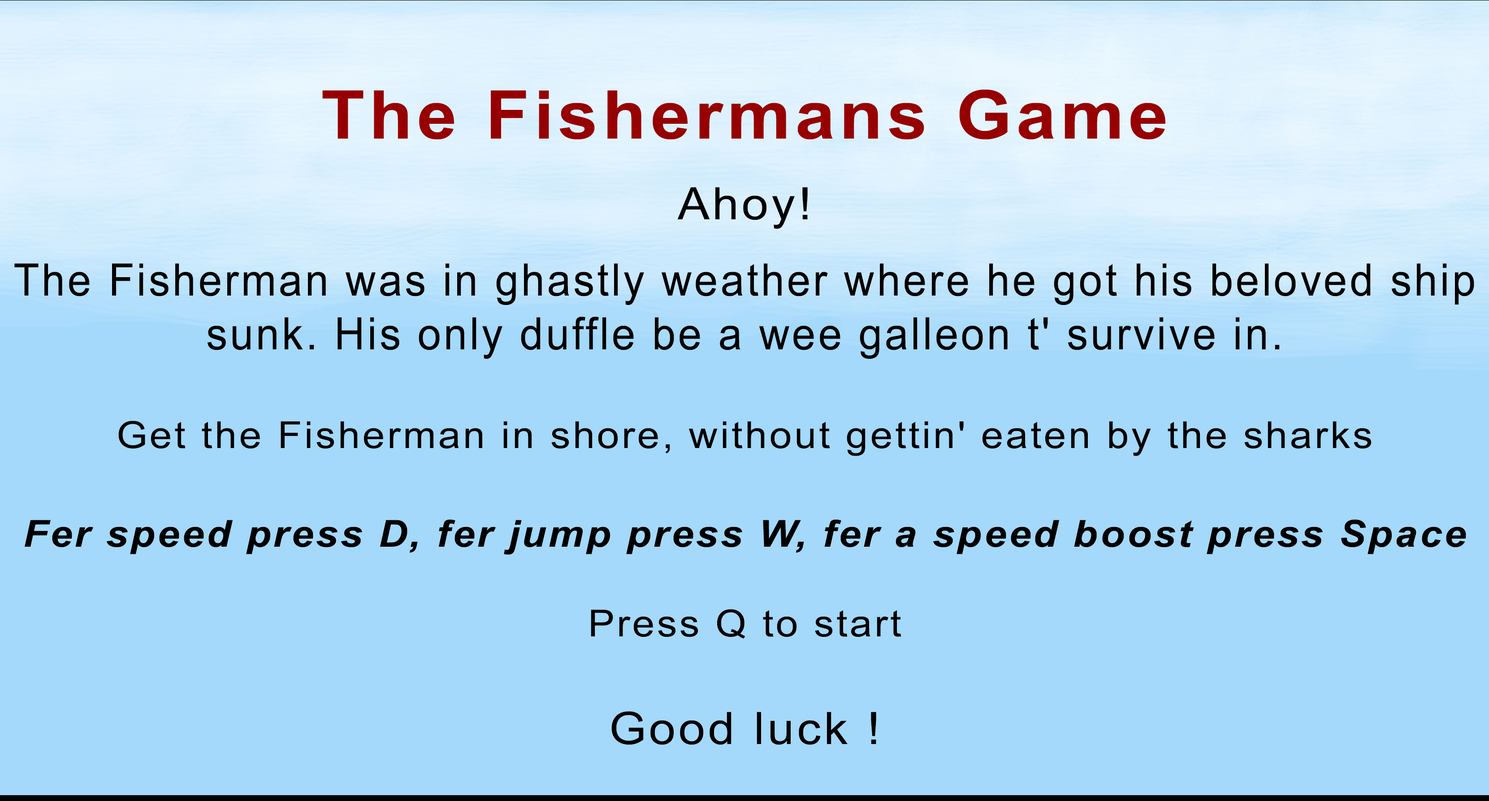
<style>
.page{position:relative;width:1489px;height:801px;background:#a4d9fb}
.page>*{position:absolute;margin:0}
.t1{font:44.8px "ArialNarrow";letter-spacing:0.05em;color:#000000;scale:1.15 1}
.t2{font:67.2px "ArialNarrow";letter-spacing:0.05em;color:#000000;scale:1.3 1}
.t3{font:67.2px "ArialNarrow-Bold";letter-spacing:0.05em;color:#970000;scale:1.3 1}
.t4{font:44.8px "ArialNarrow";letter-spacing:0.05em;color:#000000;scale:1.3 1}
.t5{font:18.7px "ArialNarrow";letter-spacing:0.05em;color:#000000;scale:1.3 1}
.t6{font:37.4px "ArialNarrow";letter-spacing:0.05em;color:#000000;scale:1.3 1}
.t7{font:37.4px "ArialNarrow-BoldItalic";letter-spacing:0.05em;color:#000000;scale:1.3 1}
</style>
<div class="page">
<p class="t1" style="left:14px;top:89px;width:1460px;height:656px;text-align:center"><span class="t2"><br></span><span class="t3">The Fishermans Game<br><br></span><span class="t4">Ahoy!<br></span><span class="t5"><br></span>The Fisherman was in ghastly weather where he got his beloved ship sunk. His only duffle be a wee galleon t' survive in. <br><br><span class="t6">Get the Fisherman in shore, without gettin' eaten by the sharks<br><br></span><span class="t7">Fer speed press D, fer jump press W, fer a speed boost press Space<br><br></span><span class="t6">Press Q to start<br></span><span class="t4"><br>Good luck !</span></p>
</div>
